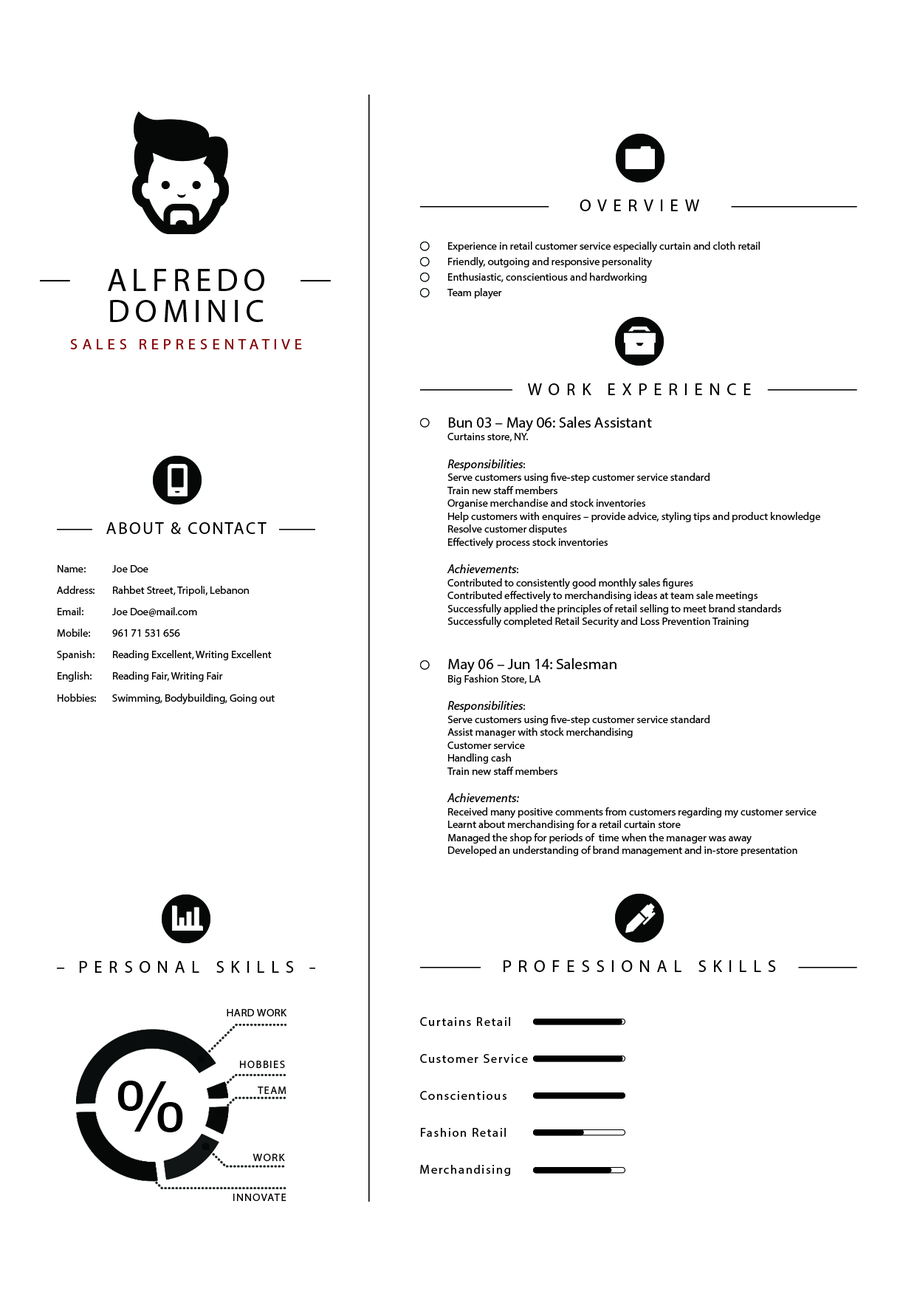
<style>
.page{position:relative;width:917px;height:1300px;background:#ffffff}
.page>*{position:absolute;margin:0}
.t1{font:16.9px "OpenSans-Semibold";letter-spacing:0.38em;color:#000000;text-transform:uppercase}
.t2{font:10.8px/7.7px "OpenSans-Bold";color:#000000}
.t3{font:32.3px/30.8px "MyriadPro-Regular";letter-spacing:0.16em;color:#000000;text-transform:uppercase}
.t4{font:15.4px "OpenSans-Semibold";letter-spacing:0.28em;color:#810000;text-transform:uppercase}
.t5{font:10.8px "MyriadPro-Regular";color:#000000}
.t6{font:15.4px "MyriadPro-Regular";color:#000000}
.t7{font:12.3px "MyriadPro-It";color:#000000}
.t8{font:16.9px "OpenSans-Semibold";letter-spacing:0.1em;color:#000000;text-transform:uppercase}
.t9{font:10.8px/21.5px "MyriadPro-Regular";color:#000000}
.t10{font:10.8px "MyriadPro-Regular";letter-spacing:0.04em;color:#000000;text-transform:uppercase}
.t11{font:12.3px/36.9px "OpenSans";letter-spacing:0.1em;color:#000000}
.t12{font:10.8px "OpenSans";letter-spacing:0.1em;color:#000000;text-transform:uppercase}
.t13{font:69.4px "Verdana";letter-spacing:0.38em;color:#000000;text-transform:uppercase}
.t14{font:10.6px "MyriadPro-Regular";letter-spacing:0.1em;color:#000000;text-transform:uppercase}
.t15{font:10.8px "MyriadPro-Regular";letter-spacing:0.1em;color:#000000;text-transform:uppercase}
</style>
<div class="page">
<p class="t1" style="left:580px;top:199px;width:119px;height:12px">Overview</p>
<p class="t2" style="left:448px;top:242px;width:312px;height:57px">Experience in retail customer service especially curtain and cloth retail<br><br>Friendly, outgoing and responsive personality<br><br>Enthusiastic, conscientious and hardworking<br>  <br>Team player</p>
<p class="t3" style="left:108px;top:269px;width:156px;height:53px;text-align:center">Alfredo<br>Dominic</p>
<p class="t4" style="left:70px;top:339px;width:232px;height:10px">Sales representative</p>
<p class="t1" style="left:528px;top:383px;width:223px;height:12px">work experience</p>
<p class="t5" style="left:447px;top:417px;width:374px;height:439px"><span class="t6">Bun 03 – May 06: Sales Assistant <br></span>Curtains store, NY.<br><br><span class="t7">Responsibilities</span>:<br>Serve customers using five-step customer service standard<br>Train new staff members<br>Organise merchandise and stock inventories<br>Help customers with enquires – provide advice, styling tips and product knowledge<br>Resolve customer disputes<br>Effectively process stock inventories<br><br><span class="t7">Achievements</span>:<br>Contributed to consistently good monthly sales figures<br>Contributed effectively to merchandising ideas at team sale meetings<br>Successfully applied the principles of retail selling to meet brand standards<br>Successfully completed Retail Security and Loss Prevention Training<br><br><br><span class="t6">May 06 – Jun 14: Salesman <br></span>Big Fashion Store, LA<br><br><span class="t7">Responsibilities</span>:<br>Serve customers using five-step customer service standard<br>Assist manager with stock merchandising<br>Customer service<br>Handling cash<br>Train new staff members<br><br><span class="t7">Achievements:<br></span>Received many positive comments from customers regarding my customer service<br>Learnt about merchandising for a retail curtain store <br>Managed the shop for periods of  time when the manager was away<br>Developed an understanding of brand management and in-store presentation</p>
<p class="t8" style="left:106px;top:522px;width:161px;height:12px">About &amp; contact</p>
<p class="t9" style="left:57px;top:565px;width:218px;height:140px">Name:  Joe Doe<br>Address:  Rahbet Street, Tripoli, Lebanon<br>Email: Joe Doe@mail.com<br>Mobile:  961 71 531 656<br>Spanish:  Reading Excellent, Writing Excellent<br>English:  Reading Fair, Writing Fair<br>Hobbies: Swimming, Bodybuilding, Going out</p>
<p class="t1" style="left:79px;top:961px;width:215px;height:12px">Personal skills</p>
<p class="t1" style="left:504px;top:960px;width:272px;height:12px">Professional skills</p>
<p class="t10" style="left:227px;top:1009px;width:60px;height:7px">Hard work</p>
<p class="t11" style="left:420px;top:1017px;width:108px;height:159px">Curtains­ Retail<br>Customer Service<br>Conscientious <br>Fashion Retail<br>Merchandising</p>
<p class="t12" style="left:240px;top:1061px;width:45px;height:7px">Hobbies</p>
<p class="t13" style="left:117px;top:1081px;width:66px;height:51px">%</p>
<p class="t14" style="left:258px;top:1086px;width:29px;height:8px">Team</p>
<p class="t15" style="left:253px;top:1154px;width:32px;height:7px">Work</p>
<p class="t12" style="left:233px;top:1194px;width:54px;height:7px">Innovate</p>
</div>
